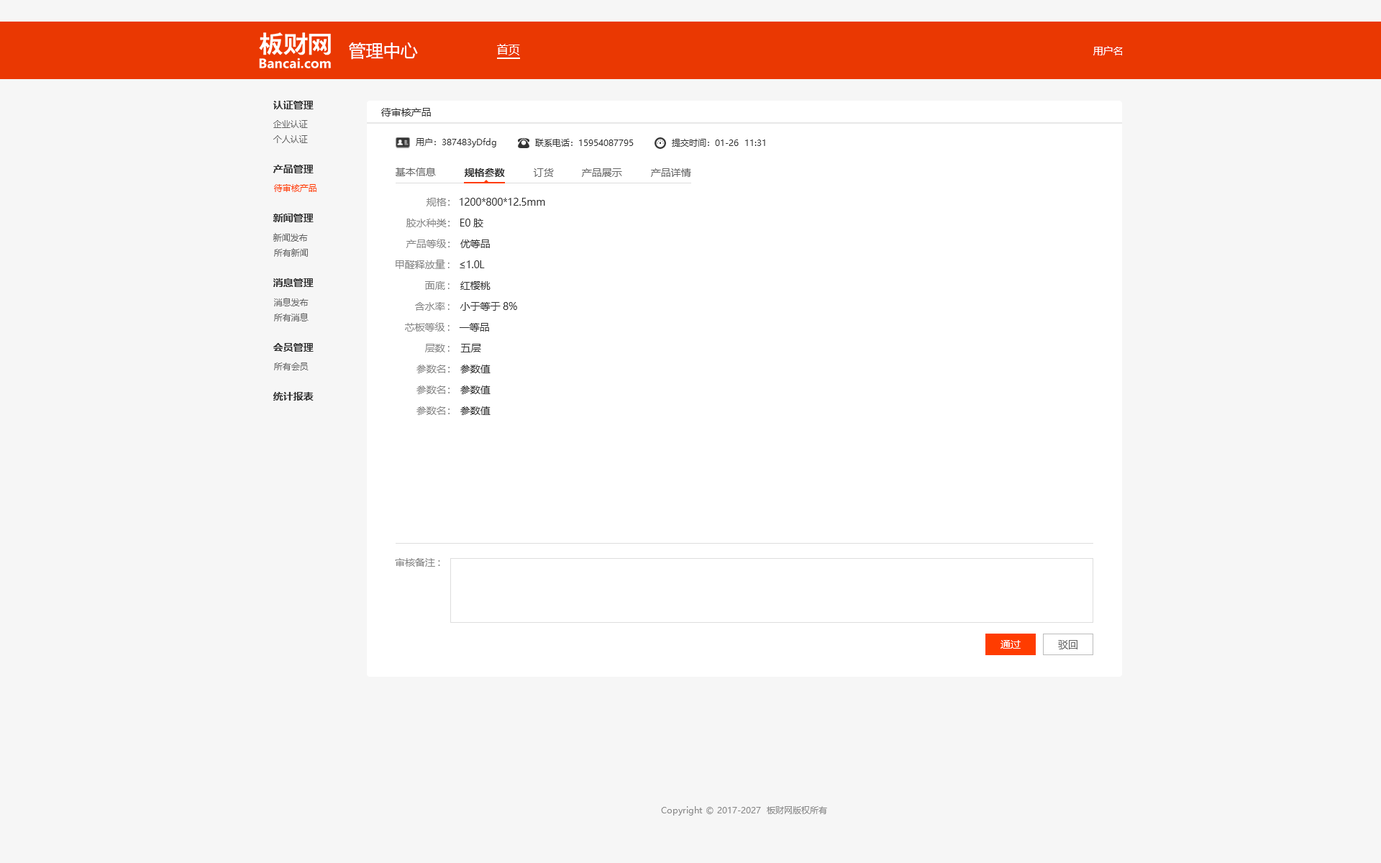
<style>
.page{position:relative;width:1381px;height:863px;background:#f6f6f6}
.page>*{position:absolute;margin:0}
.t1{font:17.3px "MicrosoftYaHei";color:#ffffff}
.t2{font:11.5px "MicrosoftYaHei";color:#ffffff}
.t3{font:10.1px "MicrosoftYaHei";color:#ffffff}
.t4{font:10.1px "MicrosoftYaHei-Bold";color:#333333}
.t5{font:10.1px "MicrosoftYaHei";color:#333333}
.t6{font:8.6px "MicrosoftYaHei";color:#666666}
.t7{font:8.6px "MicrosoftYaHei";color:#333333}
.t8{font:10.1px "MicrosoftYaHei";color:#666666}
.t9{font:8.6px "MicrosoftYaHei";color:#ff3c00}
.t10{font:10.1px "MicrosoftYaHei";color:#888888}
.t11{font:8.6px "MicrosoftYaHei";color:#888888}
</style>
<div class="page">
<p class="t1" style="left:349px;top:42px;width:69px;height:18px">管理中心</p>
<p class="t2" style="left:497px;top:44px;width:23px;height:11px">首页</p>
<p class="t3" style="left:1094px;top:46px;width:29px;height:9px">用户名</p>
<p class="t4" style="left:273px;top:101px;width:41px;height:8px">认证管理</p>
<p class="t5" style="left:381px;top:108px;width:50px;height:9px">待审核产品</p>
<p class="t6" style="left:273px;top:120px;width:35px;height:8px">企业认证</p>
<p class="t6" style="left:273px;top:135px;width:35px;height:8px">个人认证</p>
<p class="t7" style="left:416px;top:138px;width:80px;height:9px">用户：387483yDfdg</p>
<p class="t7" style="left:535px;top:139px;width:99px;height:8px">联系电话：15954087795</p>
<p class="t7" style="left:672px;top:139px;width:93px;height:8px">提交时间：01-26  11:31</p>
<p class="t4" style="left:273px;top:165px;width:41px;height:8px">产品管理</p>
<p class="t8" style="left:396px;top:168px;width:40px;height:8px">基本信息</p>
<p class="t4" style="left:464px;top:168px;width:41px;height:9px">规格参数</p>
<p class="t8" style="left:533px;top:168px;width:21px;height:9px">订货</p>
<p class="t8" style="left:582px;top:168px;width:40px;height:9px">产品展示</p>
<p class="t8" style="left:651px;top:168px;width:40px;height:9px">产品详情</p>
<p class="t9" style="left:274px;top:184px;width:43px;height:8px">待审核产品</p>
<p class="t10" style="left:427px;top:198px;width:23px;height:8px">规格：</p>
<p class="t5" style="left:460px;top:198px;width:85px;height:8px">1200*800*12.5mm</p>
<p class="t4" style="left:273px;top:214px;width:41px;height:8px">新闻管理</p>
<p class="t10" style="left:406px;top:219px;width:44px;height:8px">胶水种类：</p>
<p class="t5" style="left:460px;top:219px;width:23px;height:8px">E0胶</p>
<p class="t6" style="left:273px;top:233px;width:35px;height:9px">新闻发布</p>
<p class="t10" style="left:406px;top:239px;width:44px;height:9px">产品等级：</p>
<p class="t5" style="left:460px;top:240px;width:30px;height:8px">优等品</p>
<p class="t6" style="left:274px;top:248px;width:34px;height:9px">所有新闻</p>
<p class="t10" style="left:396px;top:260px;width:54px;height:9px">甲醛释放量:</p>
<p class="t5" style="left:460px;top:260px;width:25px;height:8px">≤1.0L</p>
<p class="t4" style="left:273px;top:278px;width:41px;height:9px">消息管理</p>
<p class="t10" style="left:425px;top:281px;width:25px;height:9px">面底:</p>
<p class="t5" style="left:460px;top:281px;width:31px;height:9px">红樱桃</p>
<p class="t6" style="left:274px;top:298px;width:35px;height:8px">消息发布</p>
<p class="t10" style="left:415px;top:302px;width:35px;height:9px">含水率:</p>
<p class="t5" style="left:460px;top:302px;width:57px;height:9px">小于等于8%</p>
<p class="t6" style="left:274px;top:313px;width:35px;height:9px">所有消息</p>
<p class="t10" style="left:405px;top:322px;width:45px;height:10px">芯板等级:</p>
<p class="t5" style="left:459px;top:323px;width:30px;height:9px">一等品</p>
<p class="t4" style="left:273px;top:343px;width:41px;height:9px">会员管理</p>
<p class="t10" style="left:425px;top:344px;width:25px;height:9px">层数:</p>
<p class="t5" style="left:460px;top:344px;width:21px;height:9px">五层</p>
<p class="t6" style="left:274px;top:363px;width:35px;height:7px">所有会员</p>
<p class="t10" style="left:417px;top:365px;width:33px;height:8px">参数名：</p>
<p class="t5" style="left:460px;top:365px;width:31px;height:8px">参数值</p>
<p class="t10" style="left:417px;top:386px;width:33px;height:8px">参数名：</p>
<p class="t5" style="left:460px;top:386px;width:31px;height:8px">参数值</p>
<p class="t4" style="left:273px;top:392px;width:41px;height:9px">统计报表</p>
<p class="t10" style="left:417px;top:406px;width:33px;height:9px">参数名：</p>
<p class="t5" style="left:460px;top:406px;width:31px;height:9px">参数值</p>
<p class="t10" style="left:395px;top:558px;width:45px;height:9px">审核备注:</p>
<p class="t3" style="left:1001px;top:640px;width:20px;height:9px">通过</p>
<p class="t8" style="left:1058px;top:640px;width:20px;height:10px">驳回</p>
<p class="t11" style="left:661px;top:806px;width:166px;height:10px">Copyright © 2017-2027  板财网版权所有</p>
</div>
